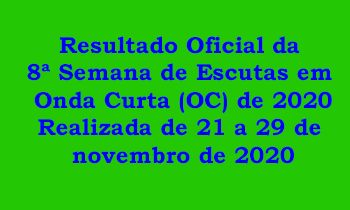
<style>
.page{position:relative;width:350px;height:210px;background:#24c704}
.page>*{position:absolute;margin:0}
.t1{font:23px "BookmanOldStyle-Bold";color:#0000f2}
</style>
<div class="page">
<p class="t1" style="left:27px;top:36px;width:305px;height:128px;text-align:center">Resultado Oficial da <br>8ª Semana de Escutas em <br>Onda Curta (OC) de 2020<br>Realizada de 21 a 29 de <br>novembro de 2020</p>
</div>
